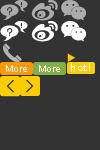
<style>
.page{position:relative;width:100px;height:150px;background:#333333}
.page>*{position:absolute;margin:0}
.t1{font:9px "ArialMT";letter-spacing:0.05em;color:#ffffff}
.t2{font:9.8px "MicrosoftYaHei";letter-spacing:0.05em;color:#ffffff}
</style>
<div class="page">
<p class="t1" style="left:6px;top:65px;width:21px;height:7px">More</p>
<p class="t1" style="left:39px;top:65px;width:21px;height:7px">More</p>
<p class="t2" style="left:71px;top:63px;width:19px;height:8px">hot!</p>
</div>
